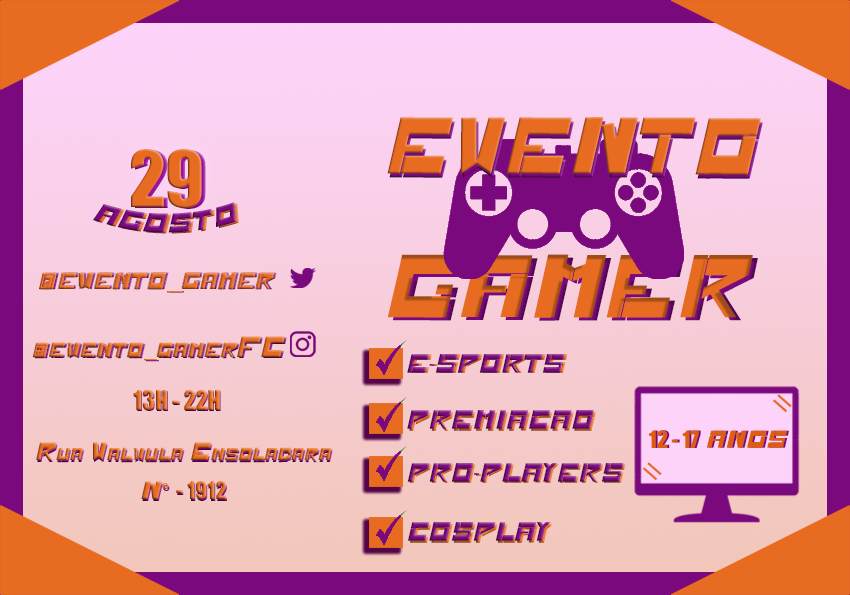
<style>
.page{position:relative;width:850px;height:595px}
.page>*{position:absolute;margin:0}
.t1{font:72px "GAME_glm";color:#e76c21}
.t2{font:72px "GAME_glm"}
.t3{font:72px "GaboDrive";color:#e76c21}
.t4{font:72px "GaboDrive"}
.t5{font:24px "GAME_glm";color:#7b097e}
.t6{font:24px "GAME_glm"}
.t7{font:80px "GAME_glm";color:#e76c21}
.t8{font:80px "GAME_glm"}
.t9{font:30px "GAME_glm"}
.t10{font:30px "MyriadPro-Regular"}
.t11{font:26px "GAME_glm"}
.t12{font:26px "MyriadPro-Regular"}
.t13{font:24px "GaboDrive"}
.t14{font:24px "ArialMT";color:#e76c21}
.t15{font:22px "GaboDrive";color:#de5d0e}
.t16{font:22px "GAME_glm";color:#de5d0e}
.t17{font:22px "GaboDrive"}
.t18{font:22px "GAME_glm"}
.t19{font:22px "Castellar"}
</style>
<div class="page">
<p class="t1" style="left:387px;top:117px;width:374px;height:58px">EVENTO</p>
<p class="t2" style="left:389px;top:121px;width:374px;height:58px">EVENTO</p>
<p class="t3" style="left:131px;top:149px;width:71px;height:59px">29</p>
<p class="t4" style="left:135px;top:150px;width:71px;height:59px">29</p>
<p class="t5" style="left:93px;top:202px;width:143px;height:31px">AGOSTO</p>
<p class="t6" style="left:96px;top:203px;width:143px;height:31px">AGOSTO</p>
<p class="t7" style="left:387px;top:254px;width:366px;height:64px">GAMER</p>
<p class="t8" style="left:392px;top:257px;width:366px;height:64px">GAMER</p>
<p class="t9" style="left:39px;top:272px;width:236px;height:21px">@evento<span class="t10">_</span>gamer</p>
<p class="t9" style="left:41px;top:272px;width:236px;height:21px">@evento<span class="t10">_</span>gamer</p>
<p class="t11" style="left:32px;top:336px;width:253px;height:25px">@evento<span class="t12">_</span>gamerFC</p>
<p class="t11" style="left:34px;top:337px;width:253px;height:25px">@evento<span class="t12">_</span>gamerFC</p>
<p class="t6" style="left:407px;top:354px;width:158px;height:19px">E-SPORTS</p>
<p class="t6" style="left:410px;top:354px;width:158px;height:19px">E-SPORTS</p>
<p class="t13" style="left:133px;top:390px;width:87px;height:20px">13H - 22H</p>
<p class="t13" style="left:134px;top:391px;width:87px;height:20px">13H - 22H</p>
<p class="t14" style="left:772px;top:394px;width:20px;height:19px;rotate:-49deg">II</p>
<p class="t6" style="left:407px;top:410px;width:187px;height:19px">PREMIACAO</p>
<p class="t6" style="left:409px;top:412px;width:187px;height:19px">PREMIACAO</p>
<p class="t15" style="left:649px;top:430px;width:138px;height:18px">12 - 17<span class="t16"> ANOS</span></p>
<p class="t17" style="left:651px;top:430px;width:138px;height:18px">12 - 17<span class="t18"> ANOS</span></p>
<p class="t18" style="left:36px;top:442px;width:296px;height:57px;text-align:center">Rua Valvula Ensoladara<br>N<span class="t19">º</span><span class="t17">º - 1912</span></p>
<p class="t18" style="left:37px;top:444px;width:296px;height:57px;text-align:center">Rua Valvula Ensoladara<br>N<span class="t19">º</span><span class="t17">º - 1912</span></p>
<p class="t14" style="left:642px;top:462px;width:20px;height:19px;rotate:-49deg">II</p>
<p class="t6" style="left:407px;top:463px;width:217px;height:19px">PRO-PLAYERS</p>
<p class="t6" style="left:409px;top:464px;width:217px;height:19px">PRO-PLAYERS</p>
<p class="t6" style="left:408px;top:522px;width:143px;height:19px">COSPLAY</p>
<p class="t6" style="left:410px;top:524px;width:143px;height:19px">COSPLAY</p>
</div>
